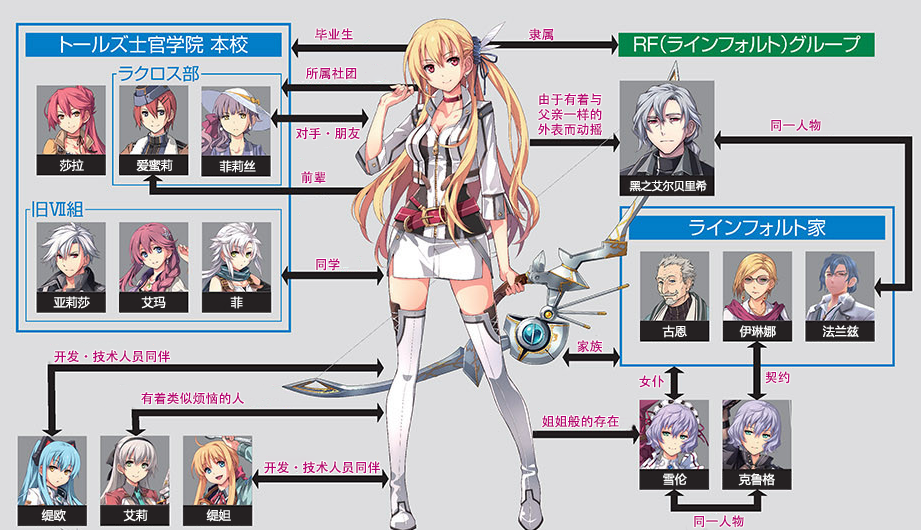
<style>
.page{position:relative;width:921px;height:530px;background:#dddddf}
.page>*{position:absolute;margin:0}
.t1{font:13px "AdobeHeitiStd-Regular";color:#b70773}
.t2{font:13px/15px "AdobeHeitiStd-Regular";color:#b70773}
.t3{font:12px "MicrosoftYaHei";color:#ffffff}
.t4{font:11px "MicrosoftYaHei";color:#ffffff}
</style>
<div class="page">
<p class="t1" style="left:315px;top:28px;width:38px;height:13px">毕业生</p>
<p class="t1" style="left:529px;top:28px;width:25px;height:13px">隶属</p>
<p class="t1" style="left:305px;top:67px;width:52px;height:13px">所属社团</p>
<p class="t2" style="left:538px;top:93px;width:64px;height:43px">由于有着与<br>父亲一样的<br>外表而动摇</p>
<p class="t1" style="left:771px;top:119px;width:50px;height:13px">同一人物</p>
<p class="t1" style="left:296px;top:127px;width:64px;height:13px">对手·朋友</p>
<p class="t3" style="left:59px;top:159px;width:25px;height:13px">莎拉</p>
<p class="t3" style="left:136px;top:159px;width:37px;height:13px">爱蜜莉</p>
<p class="t3" style="left:219px;top:160px;width:37px;height:13px">菲莉丝</p>
<p class="t1" style="left:301px;top:171px;width:25px;height:13px">前辈</p>
<p class="t4" style="left:629px;top:180px;width:78px;height:12px">黑之艾尔贝里希</p>
<p class="t1" style="left:316px;top:258px;width:24px;height:13px">同学</p>
<p class="t3" style="left:53px;top:296px;width:37px;height:13px">亚莉莎</p>
<p class="t3" style="left:141px;top:296px;width:25px;height:13px">艾玛</p>
<p class="t3" style="left:230px;top:296px;width:13px;height:13px">菲</p>
<p class="t3" style="left:662px;top:325px;width:25px;height:13px">古恩</p>
<p class="t3" style="left:739px;top:325px;width:37px;height:13px">伊琳娜</p>
<p class="t3" style="left:822px;top:325px;width:37px;height:13px">法兰兹</p>
<p class="t1" style="left:577px;top:340px;width:26px;height:13px">家族</p>
<p class="t1" style="left:54px;top:350px;width:116px;height:13px">开发·技术人员同伴</p>
<p class="t1" style="left:639px;top:375px;width:25px;height:13px">女仆</p>
<p class="t1" style="left:765px;top:371px;width:25px;height:13px">契约</p>
<p class="t1" style="left:141px;top:392px;width:103px;height:13px">有着类似烦恼的人</p>
<p class="t1" style="left:542px;top:415px;width:77px;height:13px">姐姐般的存在</p>
<p class="t1" style="left:264px;top:461px;width:116px;height:13px">开发·技术人员同伴</p>
<p class="t3" style="left:663px;top:473px;width:24px;height:13px">雪伦</p>
<p class="t3" style="left:738px;top:473px;width:37px;height:13px">克鲁格</p>
<p class="t3" style="left:41px;top:509px;width:25px;height:13px">缇欧</p>
<p class="t3" style="left:123px;top:509px;width:25px;height:13px">艾莉</p>
<p class="t3" style="left:206px;top:509px;width:25px;height:13px">缇妲</p>
<p class="t1" style="left:694px;top:515px;width:50px;height:13px">同一人物</p>
</div>
